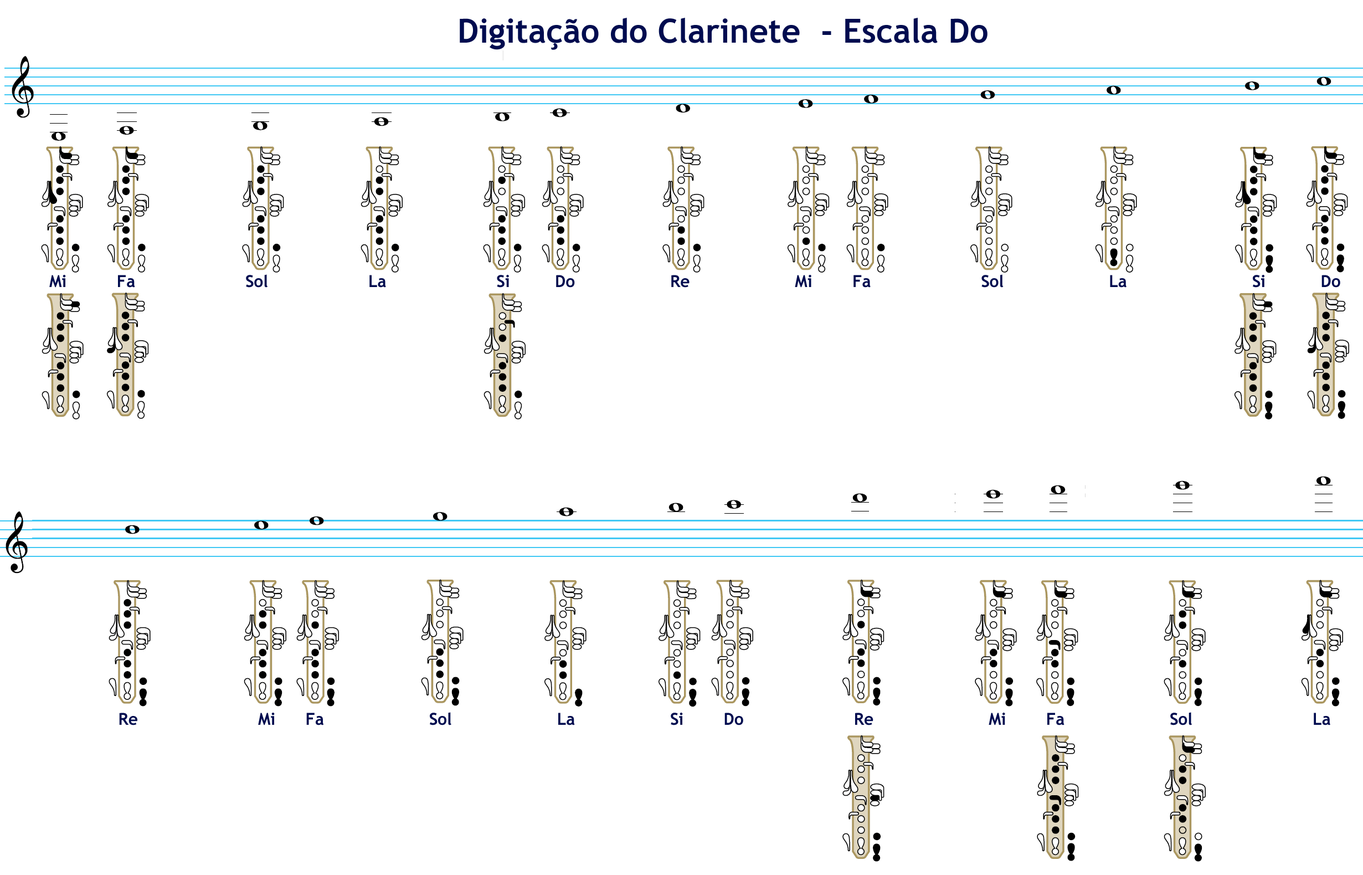
<style>
.page{position:relative;width:1363px;height:875px;background:#ffffff}
.page>*{position:absolute;margin:0}
.t1{font:33.2px "TrebuchetMS-Bold";color:#000c4f}
.t2{font:16.6px "TrebuchetMS-Bold";color:#000c4f}
</style>
<div class="page">
<p class="t1" style="left:460px;top:18px;width:528px;height:32px">Digitação do Clarinete  - Escala Do</p>
<p class="t2" style="left:49px;top:274px;width:1292px;height:13px">Mi          Fa                      Sol                    La                      Si         Do                   Re                     Mi        Fa                      Sol                     La                         Si           Do</p>
<p class="t2" style="left:119px;top:712px;width:1212px;height:13px">Re                        Mi      Fa                     Sol                     La                   Si        Do                      Re                       Mi        Fa                     Sol                        La</p>
</div>
